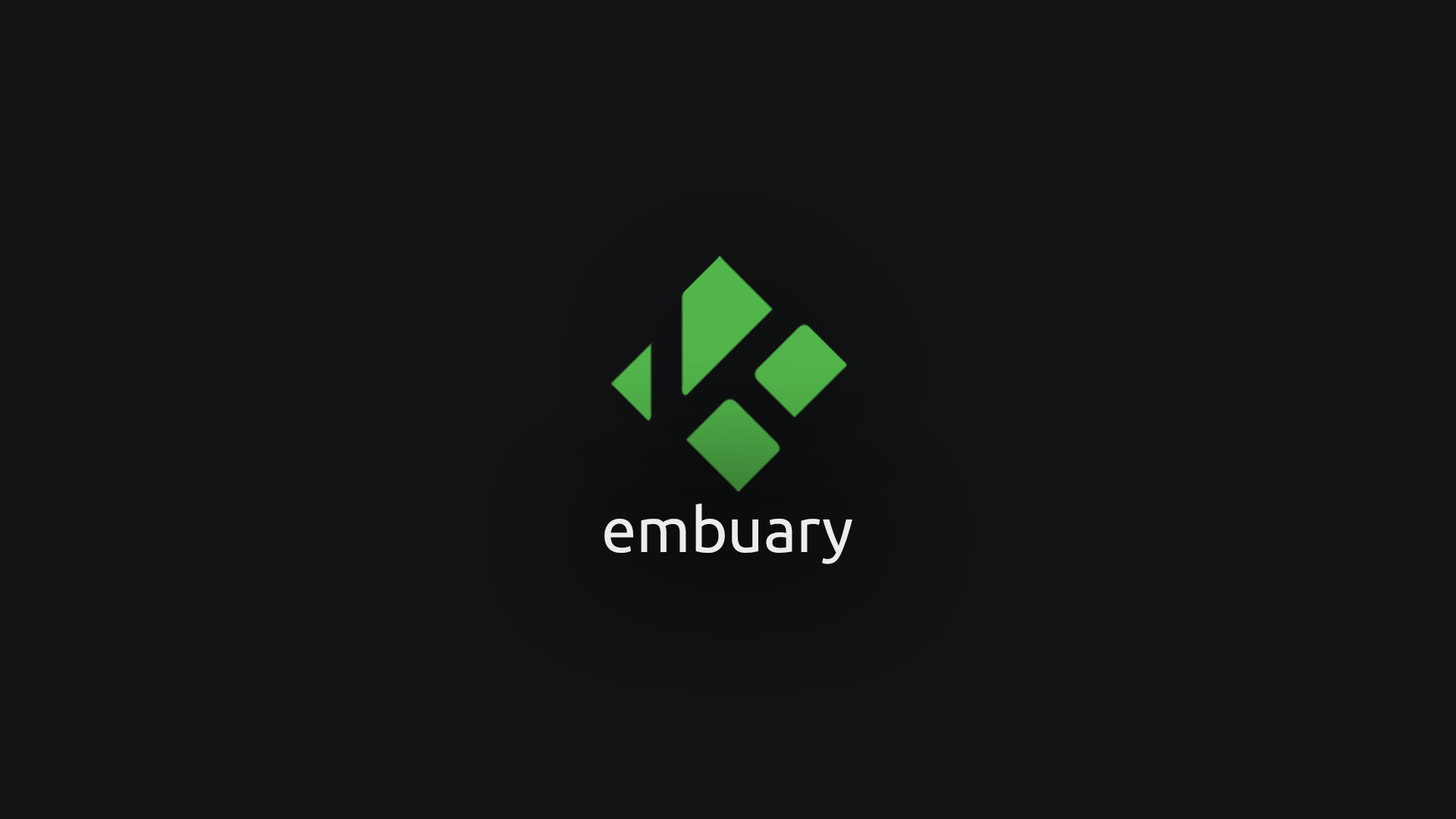
<style>
.page{position:relative;width:1456px;height:819px;background:#121314}
.page>*{position:absolute;margin:0}
.t1{font:62.6px "Ubuntu";color:#ececec}
</style>
<div class="page">
<p class="t1" style="left:604px;top:504px;width:248px;height:60px">embuary</p>
</div>
